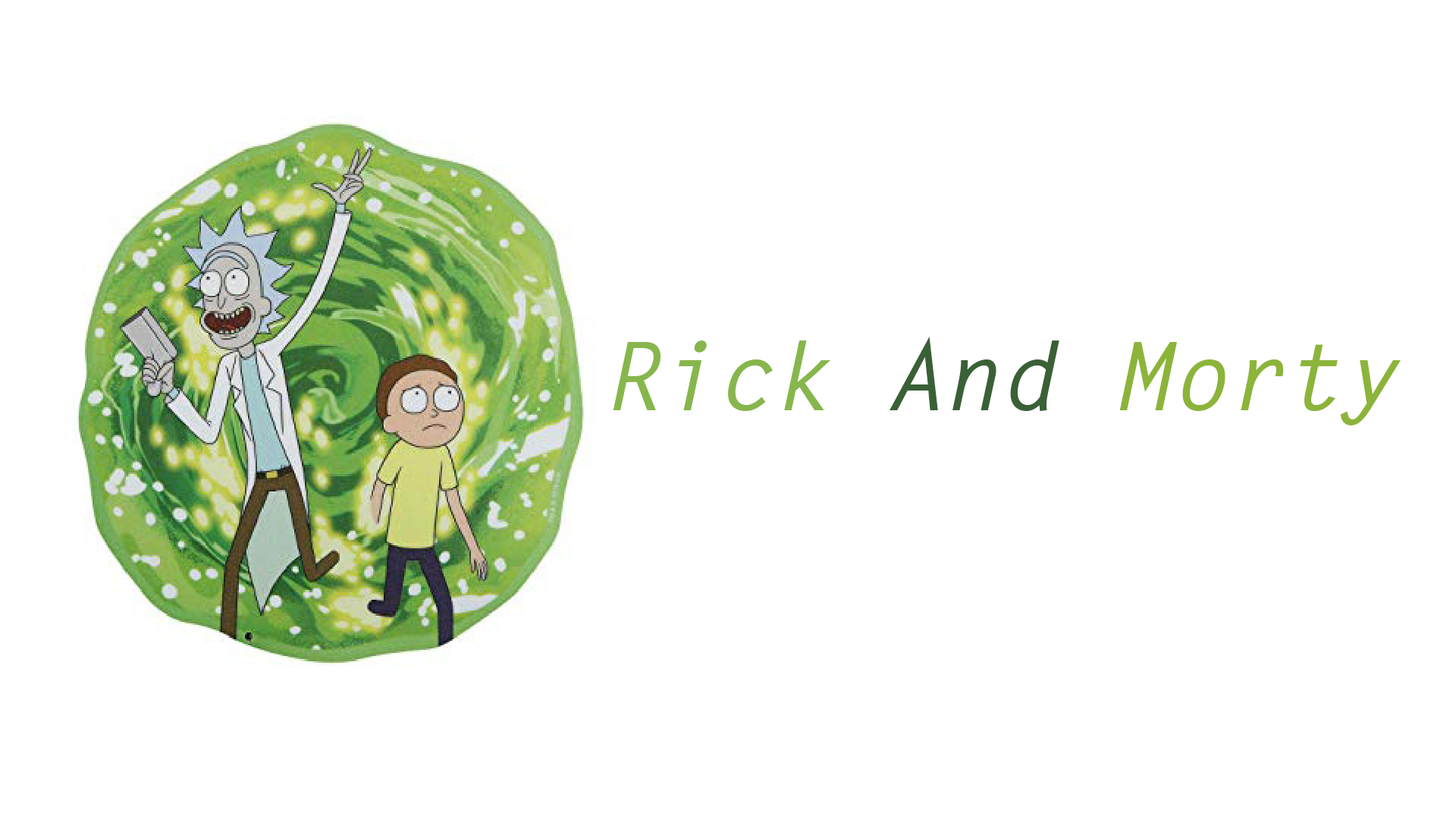
<style>
.page{position:relative;width:1456px;height:819px;background:#ffffff}
.page>*{position:absolute;margin:0}
.t1{font:94.8px "LetterGothicStd-BoldSlanted";color:#8cb43a}
.t2{font:94.8px "LetterGothicStd-BoldSlanted";color:#87b64c}
.t3{font:94.8px "LetterGothicStd-BoldSlanted";color:#3a6036}
</style>
<div class="page">
<p class="t1" style="left:613px;top:336px;width:788px;height:89px"><span class="t2">Rick </span><span class="t3">And </span>Morty</p>
</div>
